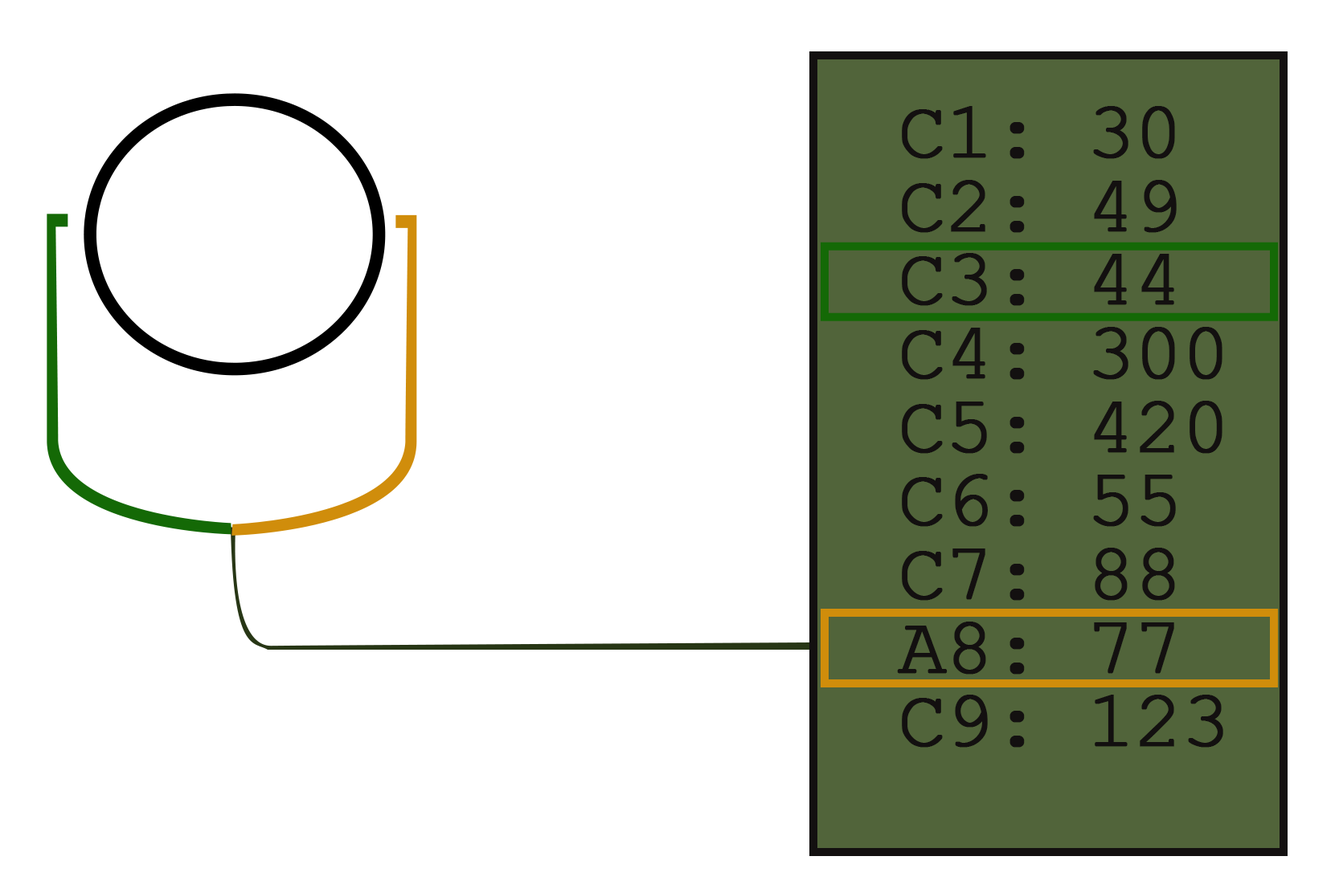
<style>
.page{position:relative;width:1335px;height:893px;background:#ffffff}
.page>*{position:absolute;margin:0}
.t1{font:80.3px/73.7px "CourierNewPSMT";letter-spacing:-0.04em;color:#131010;font-weight:bold}
</style>
<div class="page">
<p class="t1" style="left:897px;top:106px;width:326px;height:642px">C1: 30<br>C2: 49<br>C3: 44<br>C4: 300<br>C5: 420<br>C6: 55<br>C7: 88<br>A8: 77<br>C9: 123</p>
</div>
